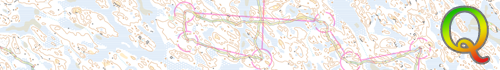
<style>
.page{position:relative;width:500px;height:70px}
.page>*{position:absolute;margin:0}
.t1{font:59.8px "PoorRichard-Regular"}
</style>
<div class="page">
<p class="t1" style="left:442px;top:7px;width:47px;height:56px">Q</p>
</div>
